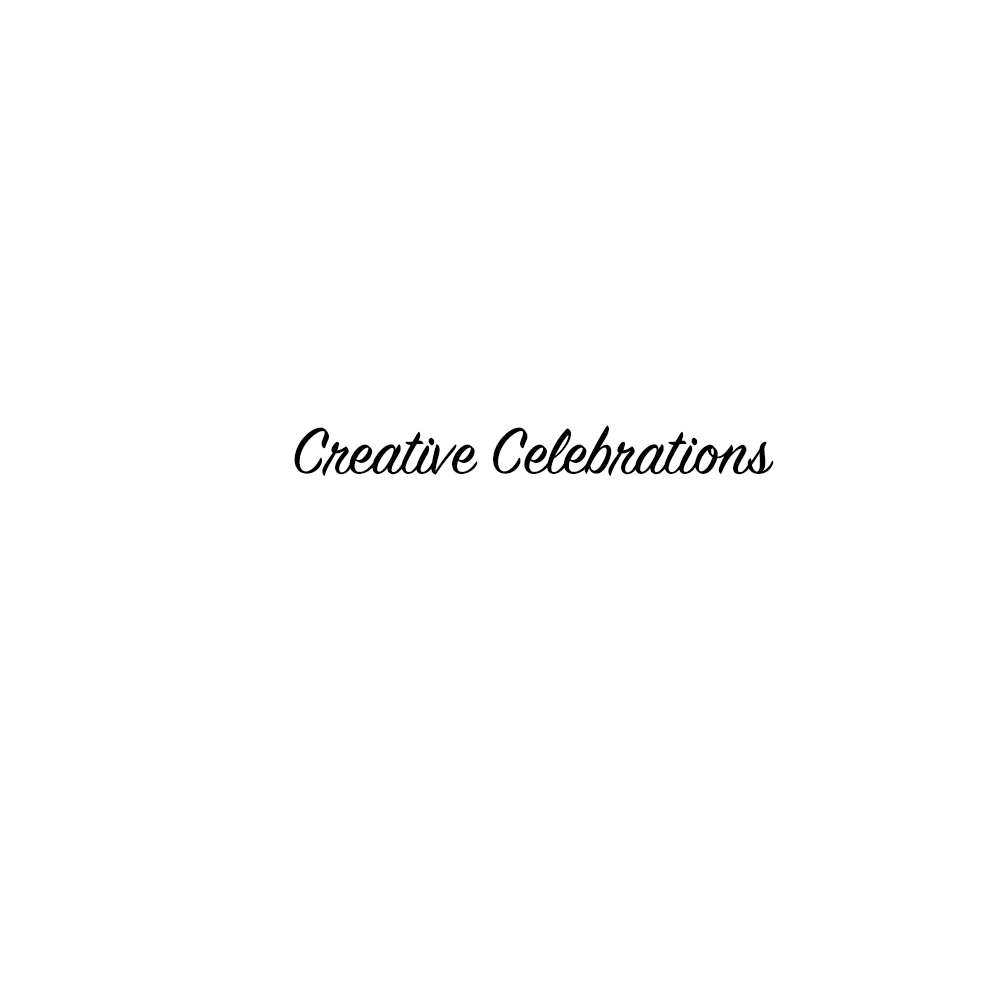
<style>
.page{position:relative;width:1000px;height:1000px;background:#ffffff}
.page>*{position:absolute;margin:0}
.t1{font:72px "SignPainter-HouseScript";color:#000000}
</style>
<div class="page">
<p class="t1" style="left:294px;top:425px;width:480px;height:51px">Creative Celebrations</p>
</div>
